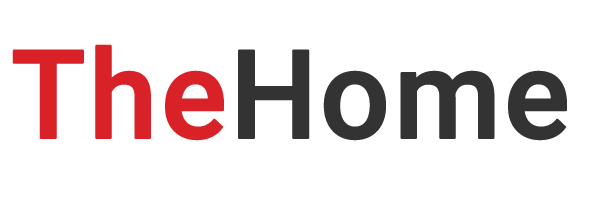
<style>
.page{position:relative;width:600px;height:200px;background:#ffffff}
.page>*{position:absolute;margin:0}
.t1{font:122.9px "Roboto-Medium";color:#333333;font-weight:bold}
.t2{font:122.9px "Roboto-Medium";color:#d92228;font-weight:bold}
</style>
<div class="page">
<p class="t1" style="left:12px;top:44px;width:555px;height:97px"><span class="t2">The</span>Home</p>
</div>
